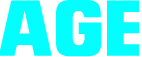
<style>
.page{position:relative;width:142px;height:57px;background:#00ffff}
.page>*{position:absolute;margin:0}
.t1{font:72px "NeographikMT";color:#00ffff}
</style>
<div class="page">
<p class="t1" style="left:0px;top:0px;width:139px;height:57px">AGE</p>
</div>
